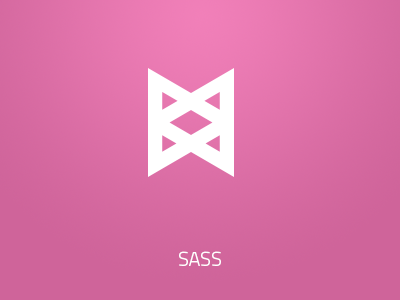
<style>
.page{position:relative;width:400px;height:300px}
.page>*{position:absolute;margin:0}
.t1{font:20px "Titillium-Light";color:#ffffff}
</style>
<div class="page">
<p class="t1" style="left:179px;top:251px;width:42px;height:15px">SASS</p>
</div>
